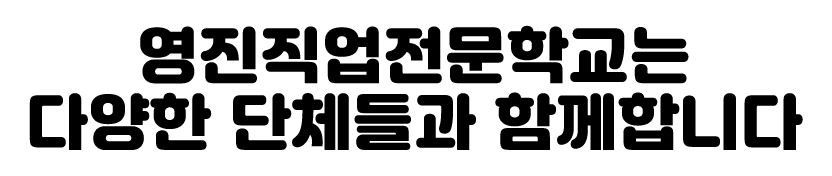
<style>
.page{position:relative;width:832px;height:176px;background:#ffffff}
.page>*{position:absolute;margin:0}
.t1{font:60px/66.7px "Jalnan";color:#000000;font-weight:bold}
</style>
<div class="page">
<p class="t1" style="left:29px;top:25px;width:774px;height:125px;text-align:center">영진직업전문학교는<br>다양한 단체들과 함께합니다</p>
</div>
